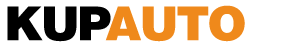
<style>
.page{position:relative;width:283px;height:48px;background:#ffffff}
.page>*{position:absolute;margin:0}
.t1{font:46.8px "Helvetica-Black";letter-spacing:-0.05em;color:#ef891b;text-transform:uppercase}
.t2{font:46.8px "Helvetica-Black";letter-spacing:-0.05em;color:#000000;text-transform:uppercase}
</style>
<div class="page">
<p class="t1" style="left:7px;top:5px;width:238px;height:37px"><span class="t2">KUP</span>AUTO</p>
</div>
